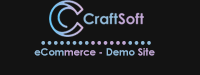
<style>
.page{position:relative;width:200px;height:75px;background:#131313}
.page>*{position:absolute;margin:0}
.t1{font:30px "MyriadPro-Regular";color:#91b9d8}
.t2{font:30px "MyriadPro-Regular";color:#c1a7d4}
.t3{font:10px "CenturyGothic-Bold";color:#c1a7d4}
.t4{font:10px "CenturyGothic-Bold";color:#91b9d8}
</style>
<div class="page">
<p class="t1" style="left:41px;top:41px;width:110px;height:4px">........<span class="t2">......</span>....</p>
<p class="t3" style="left:34px;top:48px;width:121px;height:8px"><span class="t4">eCom</span>merce - <span class="t4">Demo </span>Site</p>
</div>
